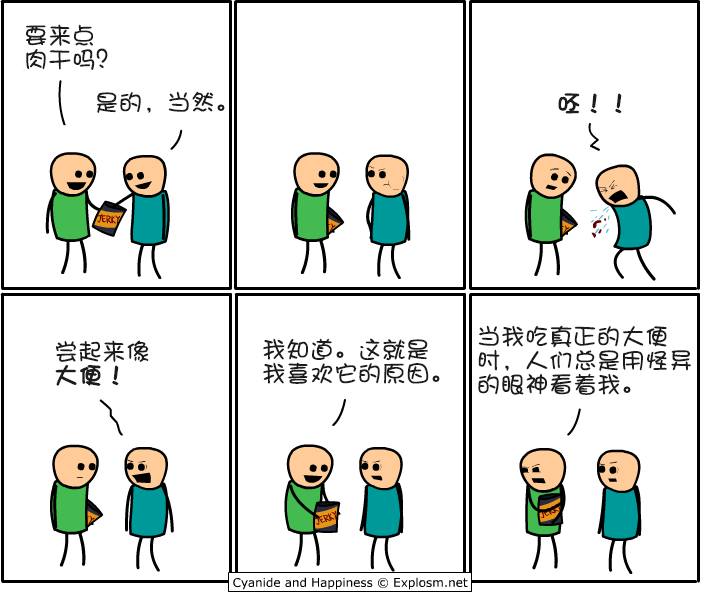
<style>
.page{position:relative;width:701px;height:593px;background:#ffffff}
.page>*{position:absolute;margin:0}
.t1{font:24px/24px "DFPShaoNvW5";color:#1b1b1b}
.t2{font:24px "DFPShaoNvW5";color:#1b1b1b}
.t3{font:24px "DFPShaoNvW5";color:#1b1b1b;font-weight:bold}
.t4{font:24px/24px "DFPShaoNvW5";color:#1b1b1b;font-weight:bold}
</style>
<div class="page">
<p class="t1" style="left:25px;top:24px;width:83px;height:46px">要来点<br>肉干吗？</p>
<p class="t2" style="left:96px;top:91px;width:129px;height:22px">是的，当然。</p>
<p class="t3" style="left:558px;top:93px;width:64px;height:21px">呸！！</p>
<p class="t1" style="left:478px;top:325px;width:214px;height:70px">当我吃真正的大便<br>时，人们总是用怪异<br>的眼神看着我。</p>
<p class="t1" style="left:55px;top:340px;width:94px;height:46px">尝起来像<br><span class="t4">大便！</span></p>
<p class="t1" style="left:263px;top:338px;width:177px;height:46px">我知道。这就是<br>我喜欢它的原因。</p>
</div>
